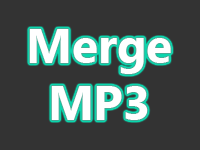
<style>
.page{position:relative;width:200px;height:150px;background:#333333}
.page>*{position:absolute;margin:0}
.t1{font:48px "SegoeUI-Bold";color:#ffffff}
</style>
<div class="page">
<p class="t1" style="left:29px;top:29px;width:142px;height:91px;text-align:center">Merge<br>MP3</p>
</div>
